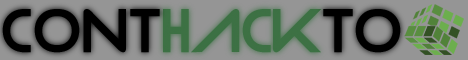
<style>
.page{position:relative;width:468px;height:60px;background:#959595}
.page>*{position:absolute;margin:0}
.t1{font:59.8px "PlainCred";color:#000000}
.t2{font:59.8px "PlainCred";color:#3d7144}
</style>
<div class="page">
<p class="t1" style="left:2px;top:9px;width:399px;height:44px">cont<span class="t2">hAck</span>to</p>
</div>
